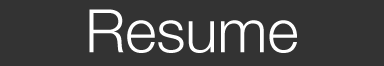
<style>
.page{position:relative;width:384px;height:66px;background:#333333}
.page>*{position:absolute;margin:0}
.t1{font:60px "HelveticaNeue-Light";color:#ffffff}
</style>
<div class="page">
<p class="t1" style="left:89px;top:9px;width:208px;height:44px">Resume</p>
</div>
